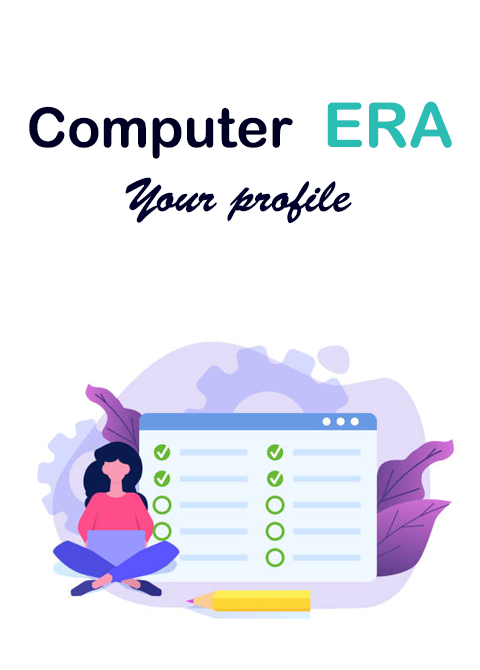
<style>
.page{position:relative;width:480px;height:670px;background:#ffffff}
.page>*{position:absolute;margin:0}
.t1{font:55px "ArialRoundedMTBold";color:#000024}
.t2{font:62px "ArialRoundedMTBold";color:#2bbdb3}
.t3{font:48px "BrushScriptStd";color:#00002d}
</style>
<div class="page">
<p class="t1" style="left:29px;top:101px;width:423px;height:58px">Computer  <span class="t2">ERA</span></p>
<p class="t3" style="left:125px;top:177px;width:227px;height:46px">Your profile</p>
</div>
